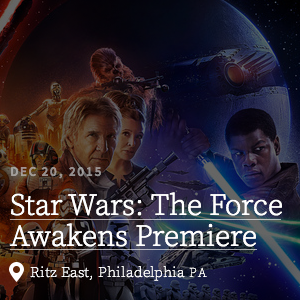
<style>
.page{position:relative;width:300px;height:300px}
.page>*{position:absolute;margin:0}
.t1{font:13px "SourceSansPro-Semibold";letter-spacing:0.12em;color:#9a918f;text-transform:uppercase}
.t2{font:30px/31px "SourceSerifPro-Light";color:#ffffff}
.t3{font:15px/31px "SourceSerifPro-ExtraLight";color:#ffffff}
.t4{font:13px/31px "SourceSerifPro-ExtraLight";letter-spacing:0.18em;color:#ffffff}
</style>
<div class="page">
<p class="t1" style="left:11px;top:166px;width:90px;height:13px">Dec 20, 2015</p>
<p class="t2" style="left:9px;top:192px;width:273px;height:89px">Star Wars: The Force Awakens Premiere<br><span class="t3">Ritz East, Philadelphia </span><span class="t4">PA</span></p>
</div>
